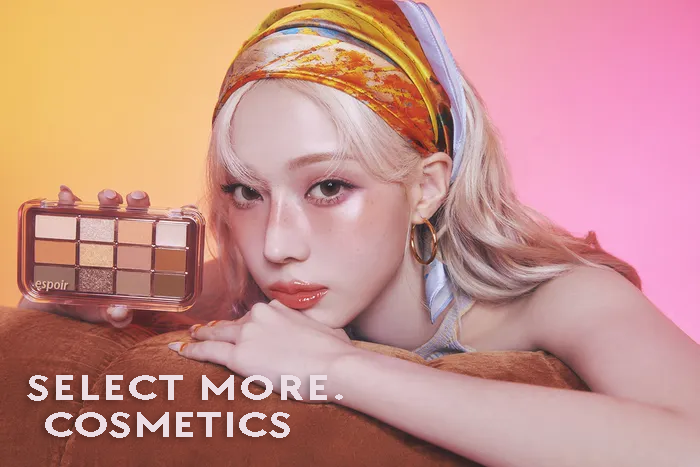
<style>
.page{position:relative;width:700px;height:467px}
.page>*{position:absolute;margin:0}
.t1{font:37px "TTChocolates-Bold";letter-spacing:0.04em;color:#ecdde4;scale:1.26 1}
.t2{font:37px "TTChocolates-Bold";color:#ecdde4;scale:1.26 1}
</style>
<div class="page">
<p class="t1" style="left:27px;top:375px;width:316px;height:26px">SELECT MORE.</p>
<p class="t2" style="left:45px;top:412px;width:245px;height:26px">COSMETICS</p>
</div>
